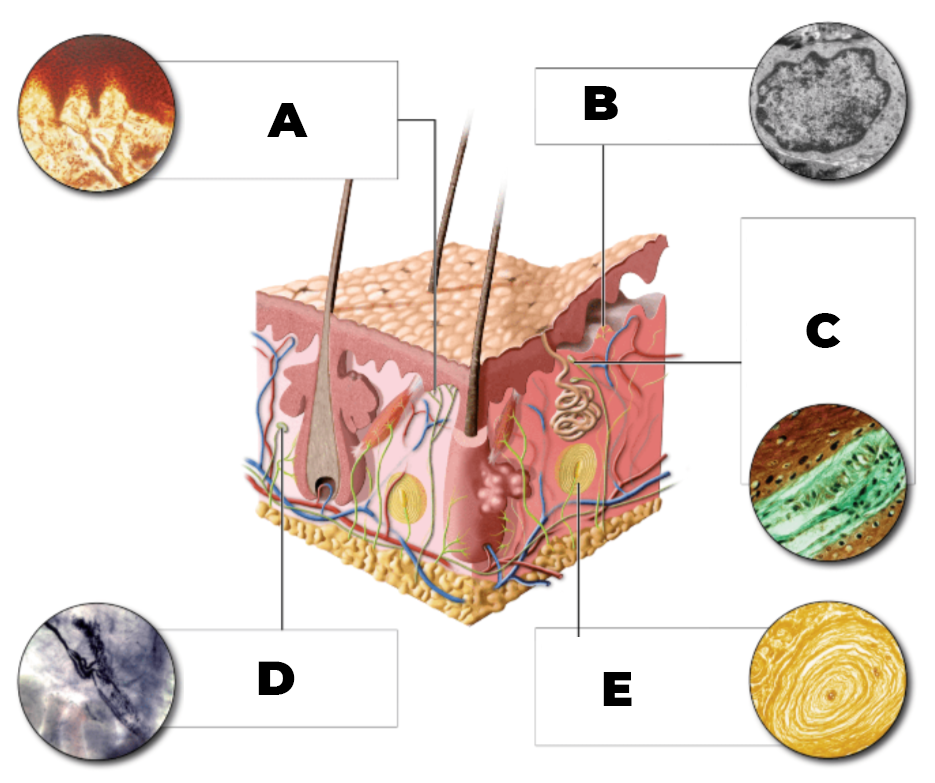
<style>
.page{position:relative;width:935px;height:783px;background:#ffffff}
.page>*{position:absolute;margin:0}
.t1{font:48px "Montserrat-Black";color:#000000}
</style>
<div class="page">
<p class="t1" style="left:584px;top:86px;width:34px;height:34px">B</p>
<p class="t1" style="left:267px;top:103px;width:41px;height:34px">A</p>
<p class="t1" style="left:806px;top:313px;width:35px;height:35px">C</p>
<p class="t1" style="left:258px;top:661px;width:37px;height:34px">D</p>
<p class="t1" style="left:603px;top:672px;width:29px;height:34px">E</p>
</div>
